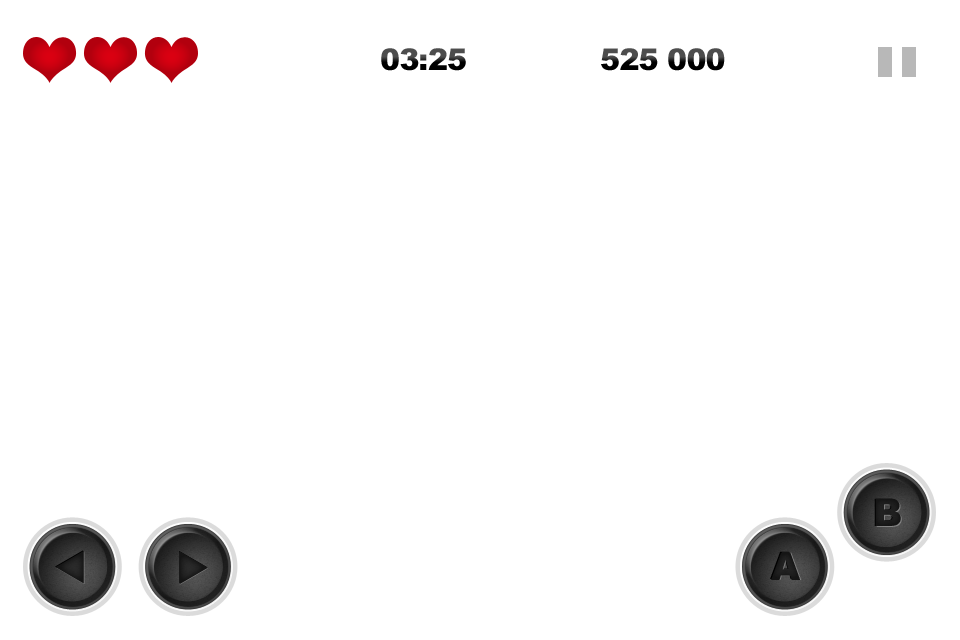
<style>
.page{position:relative;width:960px;height:640px;background:#ffffff}
.page>*{position:absolute;margin:0}
.t1{font:30px "Arial-Black";letter-spacing:-0.025em}
.t2{font:37.9px "Arial-Black";letter-spacing:-0.025em;color:#1b1b1b}
.t3{font:37.9px "Arial-Black";letter-spacing:-0.025em;color:#2d2d2d}
.t4{font:37.9px "Arial-Black";letter-spacing:-0.025em;color:#1c1c1c}
</style>
<div class="page">
<p class="t1" style="left:381px;top:48px;width:85px;height:23px">03:25</p>
<p class="t1" style="left:601px;top:48px;width:124px;height:23px">525 000</p>
<p class="t2" style="left:874px;top:498px;width:26px;height:28px">B</p>
<p class="t3" style="left:875px;top:498px;width:26px;height:28px">B</p>
<p class="t2" style="left:770px;top:551px;width:30px;height:28px">A</p>
<p class="t3" style="left:771px;top:552px;width:30px;height:28px">A</p>
<p class="t4" style="left:772px;top:552px;width:30px;height:28px">A</p>
</div>
